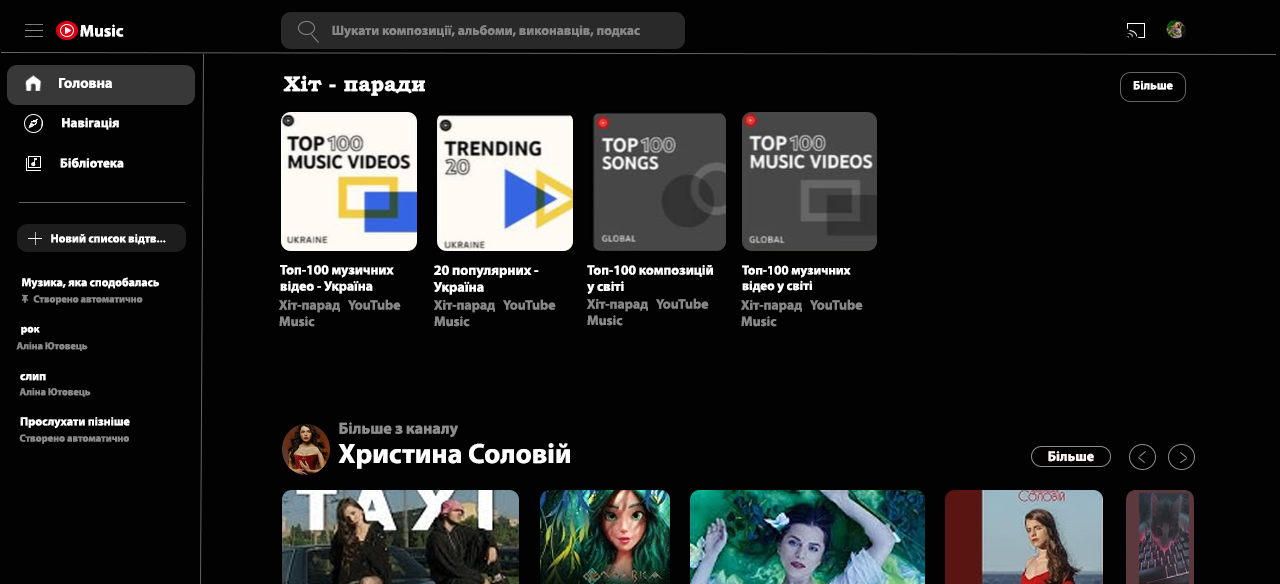
<style>
.page{position:relative;width:1280px;height:584px;background:#020202}
.page>*{position:absolute;margin:0}
.t1{font:16.9px "MyriadPro-Bold";color:#ffffff}
.t2{font:13.4px "MyriadPro-Bold";color:#878787}
.t3{font:14.5px "MyriadPro-Bold";color:#ffffff}
.t4{font:21.2px "BookmanOldStyle-Bold";color:#ffffff}
.t5{font:12px "MyriadPro-Bold";color:#ffffff}
.t6{font:13.2px "MyriadPro-Bold";color:#ffffff}
.t7{font:13.1px "MyriadPro-Bold";color:#ffffff}
.t8{font:11.8px "MyriadPro-Bold";color:#ffffff}
.t9{font:13.6px "MyriadPro-Bold";color:#ffffff}
.t10{font:14px "MyriadPro-Bold";color:#ffffff}
.t11{font:13px "MyriadPro-Bold";color:#ffffff}
.t12{font:11.7px "MyriadPro-Bold";color:#ffffff}
.t13{font:10.2px "MyriadPro-Bold";color:#878787}
.t14{font:13.7px "MyriadPro-Bold";color:#878787}
.t15{font:11px "MyriadPro-Bold";color:#ffffff}
.t16{font:10.2px "MyriadPro-Bold";color:#898989}
.t17{font:11.9px "MyriadPro-Bold";color:#ffffff}
.t18{font:16px "MyriadPro-Bold";color:#8d8d8d}
.t19{font:28px "MyriadPro-Bold";color:#ffffff}
.t20{font:11px "MyriadPro-Bold"}
.t21{font:14px "MyriadPro-Bold";color:#fff3f3}
</style>
<div class="page">
<p class="t1" style="left:80px;top:24px;width:44px;height:13px">Music</p>
<p class="t2" style="left:332px;top:25px;width:308px;height:13px">Шукати композиції, альбоми, виконавців, подкас</p>
<p class="t3" style="left:59px;top:78px;width:53px;height:10px">Головна</p>
<p class="t4" style="left:283px;top:75px;width:142px;height:21px">Хіт - паради</p>
<p class="t5" style="left:1133px;top:80px;width:40px;height:10px">Більше</p>
<p class="t6" style="left:62px;top:117px;width:57px;height:13px">Навігація</p>
<p class="t7" style="left:60px;top:157px;width:64px;height:11px">Бібліотека</p>
<p class="t8" style="left:51px;top:234px;width:115px;height:11px">Новий список відтв...</p>
<p class="t9" style="left:280px;top:265px;width:114px;height:29px">Топ-100 музичних<br>відео - Україна</p>
<p class="t10" style="left:433px;top:265px;width:106px;height:30px">20 популярних -<br>Україна</p>
<p class="t9" style="left:587px;top:265px;width:126px;height:29px">Топ-100 композицій<br>у світі</p>
<p class="t11" style="left:742px;top:265px;width:109px;height:28px">Топ-100 музичних <br>відео у світі</p>
<p class="t12" style="left:22px;top:277px;width:137px;height:12px">Музика, яка сподобалась</p>
<p class="t13" style="left:33px;top:295px;width:110px;height:10px">Створено автоматично</p>
<p class="t14" style="left:279px;top:299px;width:122px;height:28px">Хіт-парад   YouTube<br>Music</p>
<p class="t14" style="left:434px;top:299px;width:122px;height:28px">Хіт-парад   YouTube<br>Music</p>
<p class="t14" style="left:587px;top:298px;width:122px;height:28px">Хіт-парад   YouTube<br>Music</p>
<p class="t14" style="left:741px;top:299px;width:122px;height:28px">Хіт-парад   YouTube<br>Music</p>
<p class="t15" style="left:21px;top:326px;width:19px;height:9px">рок</p>
<p class="t16" style="left:16px;top:342px;width:72px;height:9px">Аліна Ютовець</p>
<p class="t17" style="left:20px;top:374px;width:26px;height:7px">слип</p>
<p class="t16" style="left:19px;top:388px;width:72px;height:9px">Аліна Ютовець</p>
<p class="t17" style="left:20px;top:417px;width:110px;height:12px">Прослухати пізніше</p>
<p class="t18" style="left:339px;top:422px;width:119px;height:16px">Більше з каналу</p>
<p class="t16" style="left:19px;top:434px;width:110px;height:10px">Створено автоматично</p>
<p class="t19" style="left:338px;top:443px;width:232px;height:26px">Христина Соловій</p>
<p class="t20" style="left:1046px;top:450px;width:36px;height:9px">Більше</p>
<p class="t21" style="left:1048px;top:451px;width:46px;height:11px">Більше</p>
</div>
